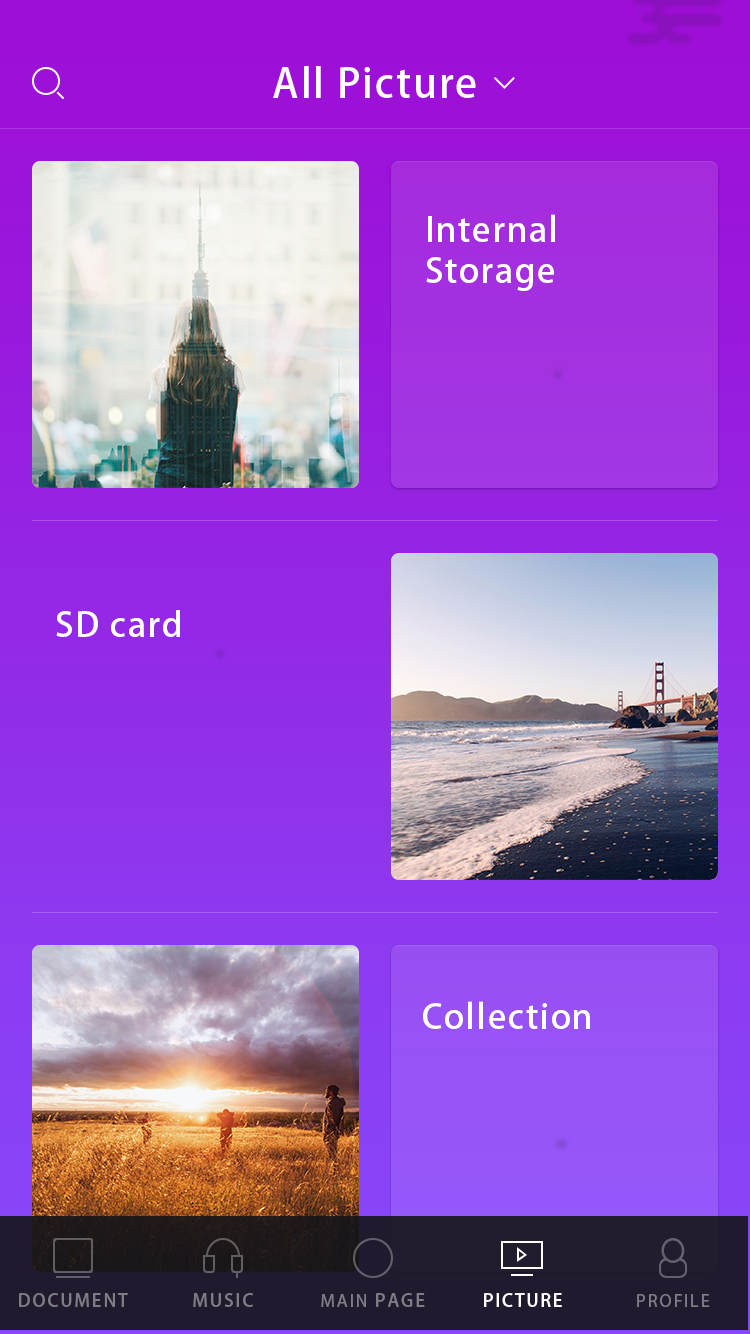
<style>
.page{position:relative;width:750px;height:1334px}
.page>*{position:absolute;margin:0}
.t1{font:34px "AdobeHeitiStd-Regular";letter-spacing:0.05em;color:#ffffff}
.t2{font:18px "AdobeHeitiStd-Regular";letter-spacing:0.1em;color:#7e7c84;text-transform:uppercase}
.t3{font:18px "MyriadPro-Regular";letter-spacing:0.1em;color:#7e7c84;text-transform:uppercase}
.t4{font:18px "AdobeHeitiStd-Regular";letter-spacing:0.1em;color:#ffffff;text-transform:uppercase}
</style>
<div class="page">
<p class="t1" style="left:426px;top:214px;width:129px;height:77px">Internal <br>Storage</p>
<p class="t1" style="left:56px;top:610px;width:124px;height:27px">SD card</p>
<p class="t1" style="left:423px;top:1001px;width:167px;height:28px">Collection</p>
<p class="t2" style="left:19px;top:1293px;width:109px;height:14px">Document</p>
<p class="t2" style="left:193px;top:1293px;width:60px;height:14px">Music</p>
<p class="t3" style="left:321px;top:1293px;width:104px;height:14px">main <span class="t2">page</span></p>
<p class="t4" style="left:484px;top:1293px;width:78px;height:14px">PICTURE</p>
<p class="t3" style="left:637px;top:1294px;width:73px;height:13px">profile</p>
</div>
